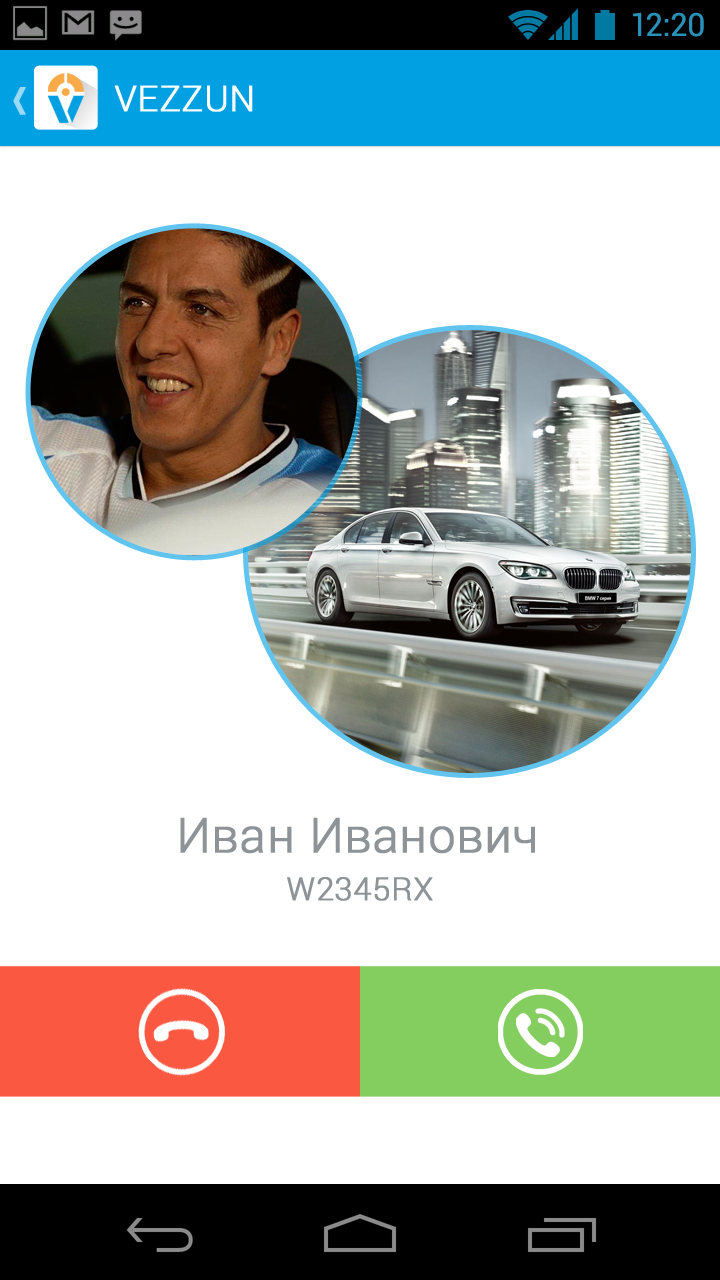
<style>
.page{position:relative;width:720px;height:1280px;background:#ffffff}
.page>*{position:absolute;margin:0}
.t1{font:32px "Roboto-Regular";color:#2991b7}
.t2{font:36px "Roboto-Light";color:#ffffff;text-transform:uppercase;font-weight:bold}
.t3{font:48px "Roboto-Light";letter-spacing:0.01em;color:#8d9397;font-weight:bold}
.t4{font:32px "Roboto-Light";letter-spacing:0.01em;color:#8d9397;text-transform:uppercase;font-weight:bold}
</style>
<div class="page">
<p class="t1" style="left:633px;top:12px;width:71px;height:25px">12:20</p>
<p class="t2" style="left:114px;top:85px;width:139px;height:27px">Vezzun</p>
<p class="t3" style="left:180px;top:817px;width:355px;height:37px">Иван Иванович</p>
<p class="t4" style="left:287px;top:877px;width:146px;height:24px">w2345rx</p>
</div>
